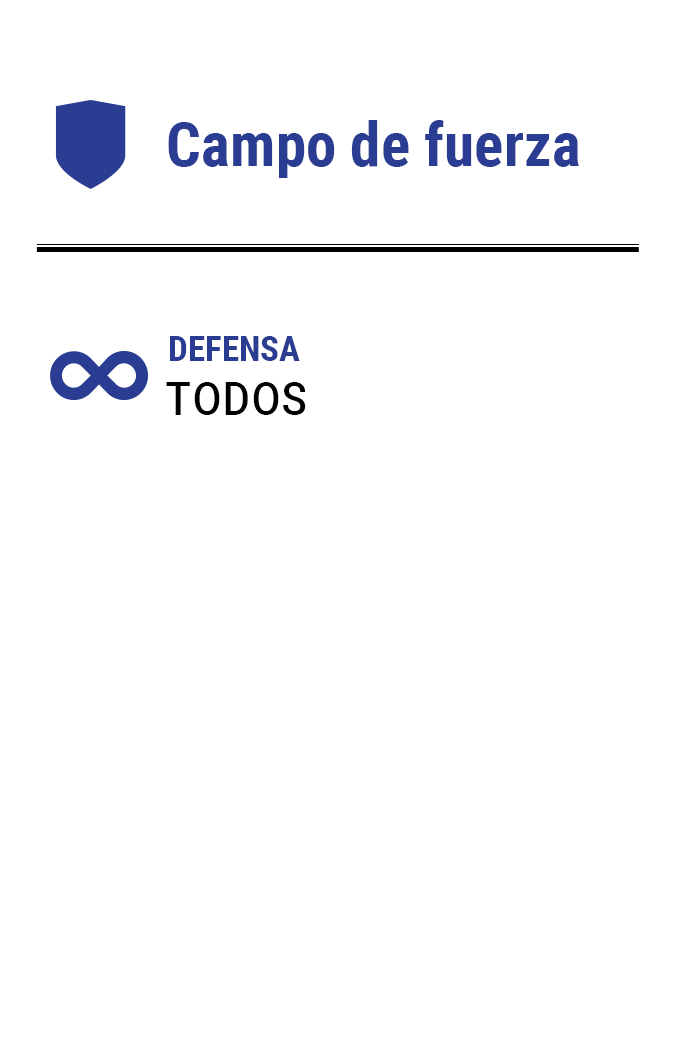
<style>
.page{position:relative;width:675px;height:1050px;background:#ffffff}
.page>*{position:absolute;margin:0}
.t1{font:61.2px "RobotoCondensed-Bold";color:#2a3d93}
.t2{font:35px "RobotoCondensed-Bold";color:#2a3d93}
.t3{font:58.3px "RobotoCondensed-Regular";color:#000000;font-variant:small-caps}
</style>
<div class="page">
<p class="t1" style="left:168px;top:120px;width:411px;height:58px">Campo de fuerza</p>
<p class="t2" style="left:170px;top:336px;width:130px;height:25px">DEFENSA</p>
<p class="t3" style="left:166px;top:382px;width:140px;height:33px">todos</p>
</div>
